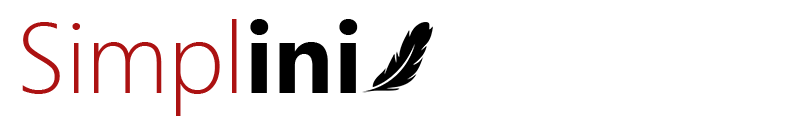
<style>
.page{position:relative;width:800px;height:120px;background:#ffffff}
.page>*{position:absolute;margin:0}
.t1{font:100px "SegoeUI-Light";color:#ac1212}
.t2{font:100px "SegoeUI-Bold";color:#000000}
</style>
<div class="page">
<p class="t1" style="left:22px;top:19px;width:336px;height:97px">Simpl<span class="t2">ini</span></p>
</div>
